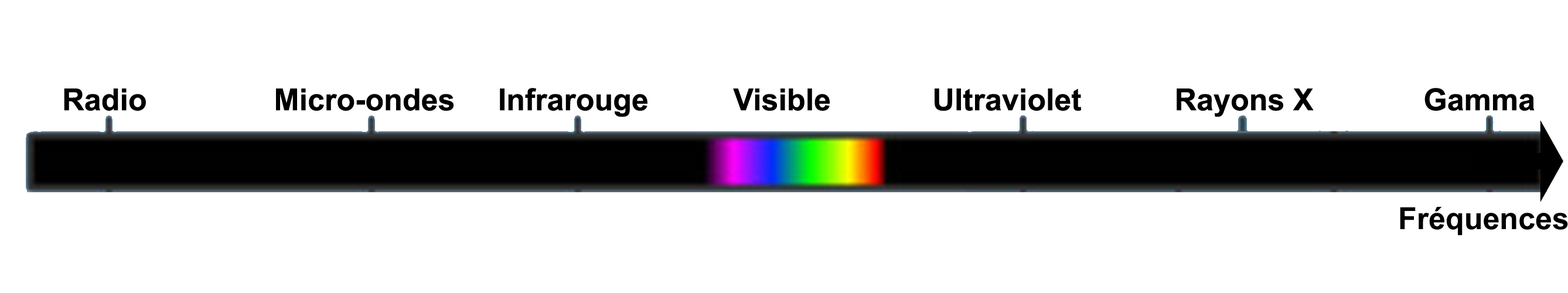
<style>
.page{position:relative;width:1568px;height:293px;background:#ffffff}
.page>*{position:absolute;margin:0}
.t1{font:30.5px "Arial-BoldMT";color:#000000}
</style>
<div class="page">
<p class="t1" style="left:64px;top:88px;width:1471px;height:29px">Radio               Micro-ondes     Infrarouge          Visible            Ultraviolet           Rayons X             Gamma</p>
<p class="t1" style="left:1400px;top:207px;width:168px;height:29px">Fréquences</p>
</div>
